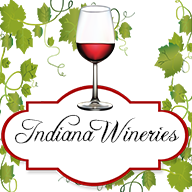
<style>
.page{position:relative;width:192px;height:192px;background:#ffffff}
.page>*{position:absolute;margin:0}
.t1{font:29.2px "FreebooterScript";color:#000000}
</style>
<div class="page">
<p class="t1" style="left:14px;top:114px;width:166px;height:30px">Indiana Wineries</p>
</div>
